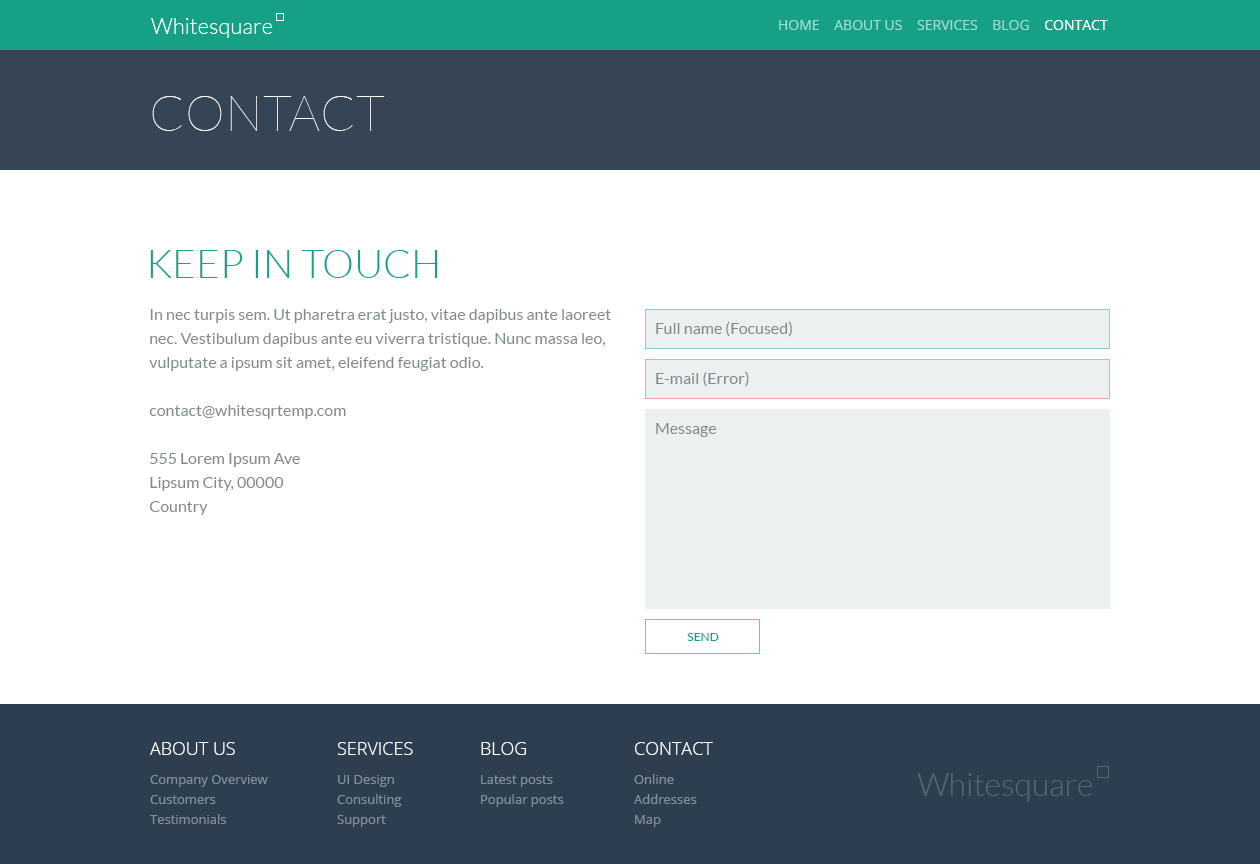
<style>
.page{position:relative;width:1260px;height:864px;background:#ffffff}
.page>*{position:absolute;margin:0}
.t1{font:14px "OpenSans";color:#9bded1;text-transform:uppercase}
.t2{font:14px "OpenSans";color:#ffffff;text-transform:uppercase}
.t3{font:50px "Lato-Hairline";color:#ffffff;text-transform:uppercase}
.t4{font:40px "Lato-Light";color:#16a085;text-transform:uppercase}
.t5{font:16px/24px "Lato-Regular";color:#7f8c8d}
.t6{font:16px "Lato-Regular";color:#7f8c8d}
.t7{font:12px "Lato-Regular";color:#16a085;text-transform:uppercase}
.t8{font:18px "OpenSans-Light";color:#ffffff;text-transform:uppercase}
.t9{font:13px/20px "OpenSans";color:#7f8e9c}
</style>
<div class="page">
<p class="t1" style="left:779px;top:20px;width:329px;height:10px">home    about us    services    blog    <span class="t2">contact</span></p>
<p class="t3" style="left:152px;top:96px;width:233px;height:35px">Contact</p>
<p class="t4" style="left:150px;top:250px;width:288px;height:28px">Keep in touch</p>
<p class="t5" style="left:149px;top:309px;width:462px;height:206px">In nec turpis sem. Ut pharetra erat justo, vitae dapibus ante laoreet nec. Vestibulum dapibus ante eu viverra tristique. Nunc massa leo, vulputate a ipsum sit amet, eleifend feugiat odio.<br><br>contact@whitesqrtemp.com<br><br>555 Lorem Ipsum Ave<br>Lipsum City, 00000<br>Country</p>
<p class="t6" style="left:656px;top:321px;width:136px;height:16px">Full name (Focused)</p>
<p class="t6" style="left:656px;top:371px;width:93px;height:16px">E-mail (Error)</p>
<p class="t6" style="left:656px;top:423px;width:61px;height:14px">Message</p>
<p class="t7" style="left:687px;top:633px;width:32px;height:8px">Send</p>
<p class="t8" style="left:150px;top:742px;width:85px;height:13px">about us</p>
<p class="t8" style="left:337px;top:742px;width:76px;height:13px">Services</p>
<p class="t8" style="left:481px;top:742px;width:45px;height:13px">Blog</p>
<p class="t8" style="left:635px;top:742px;width:78px;height:13px">Contact</p>
<p class="t9" style="left:634px;top:774px;width:63px;height:53px">Online<br>Addresses<br>Map</p>
<p class="t9" style="left:150px;top:775px;width:118px;height:49px">Company Overview<br>Customers<br>Testimonials</p>
<p class="t9" style="left:337px;top:775px;width:65px;height:52px">UI Design<br>Consulting<br>Support</p>
<p class="t9" style="left:481px;top:775px;width:83px;height:32px">Latest posts<br>Popular posts</p>
</div>
